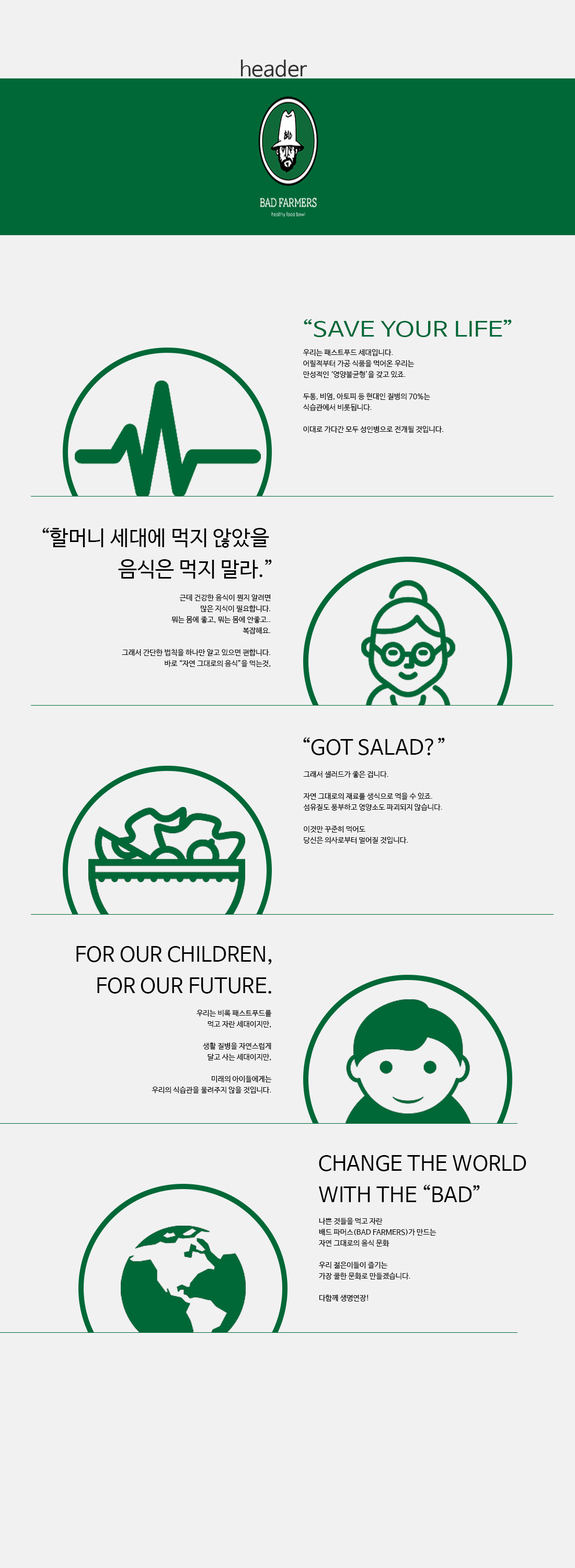
<style>
.page{position:relative;width:575px;height:1568px;background:#f1f1f1}
.page>*{position:absolute;margin:0}
.t1{font:20.9px "NanumBarunGothic";color:#333333}
.t2{font:20.9px "NanumBarunGothic";color:#006837;scale:1.22 1}
.t3{font:7.3px/11px "NanumBarunGothic";color:#000000}
.t4{font:20.9px/31.4px "NanumBarunGothic";color:#000000}
.t5{font:20.9px "NanumBarunGothic";color:#000000}
</style>
<div class="page">
<p class="t1" style="left:241px;top:60px;width:66px;height:17px">header</p>
<p class="t2" style="left:304px;top:319px;width:208px;height:18px">“SAVE YOUR LIFE”</p>
<p class="t3" style="left:303px;top:349px;width:141px;height:84px">우리는 패스트푸드 세대입니다.<br>어릴적부터 가공 식품을 먹어온 우리는<br>만성적인 ‘영양불균형’을 갖고 있죠.<br><br>두통, 비염, 아토피 등 현대인 질병의 70%는<br>식습관에서 비롯됩니다.<br><br>이대로 가다간 모두 성인병으로 전개될 것입니다.</p>
<p class="t4" style="left:42px;top:527px;width:230px;height:52px;text-align:right">“할머니 세대에 먹지 않았을 <br>음식은 먹지 말라.”</p>
<p class="t3" style="left:122px;top:594px;width:149px;height:73px;text-align:right">근데 건강한 음식이 뭔지 알려면<br>많은 지식이 필요합니다.<br>뭐는 몸에 좋고, 뭐는 몸에 안좋고..<br>복잡해요.<br><br>그래서 간단한 법칙을 하나만 알고 있으면 편합니다.<br>바로 “자연 그대로의 음식”을 먹는것,</p>
<p class="t5" style="left:303px;top:737px;width:142px;height:18px">“GOT SALAD?”</p>
<p class="t3" style="left:303px;top:771px;width:139px;height:73px">그래서 샐러드가 좋은 겁니다.<br><br>자연 그대로의 재료를 생식으로 먹을 수 있죠.<br>섬유질도 풍부하고 영양소도 파괴되지 않습니다.<br><br>이것만 꾸준히 먹어도<br>당신은 의사로부터 멀어질 것입니다.</p>
<p class="t4" style="left:76px;top:946px;width:196px;height:48px;text-align:right">FOR OUR CHILDREN,<br>FOR OUR FUTURE.</p>
<p class="t3" style="left:152px;top:1010px;width:120px;height:83px;text-align:right">우리는 비록 패스트푸드를<br>먹고 자란 세대이지만,<br><br>생활 질병을 자연스럽게<br>달고 사는 세대이지만,<br><br>미래의 아이들에게는<br>우리의 식습관을 물려주지 않을 것입니다.</p>
<p class="t4" style="left:318px;top:1155px;width:208px;height:47px">CHANGE THE WORLD<br>WITH THE “BAD”</p>
<p class="t3" style="left:318px;top:1217px;width:118px;height:84px">나쁜 것들을 먹고 자란<br>배드 파머스(BAD FARMERS)가 만드는<br>자연 그대로의 음식 문화<br><br>우리 젊은이들이 즐기는<br>가장 쿨한 문화로 만들겠습니다.<br><br>다함께 생명연장!</p>
</div>
